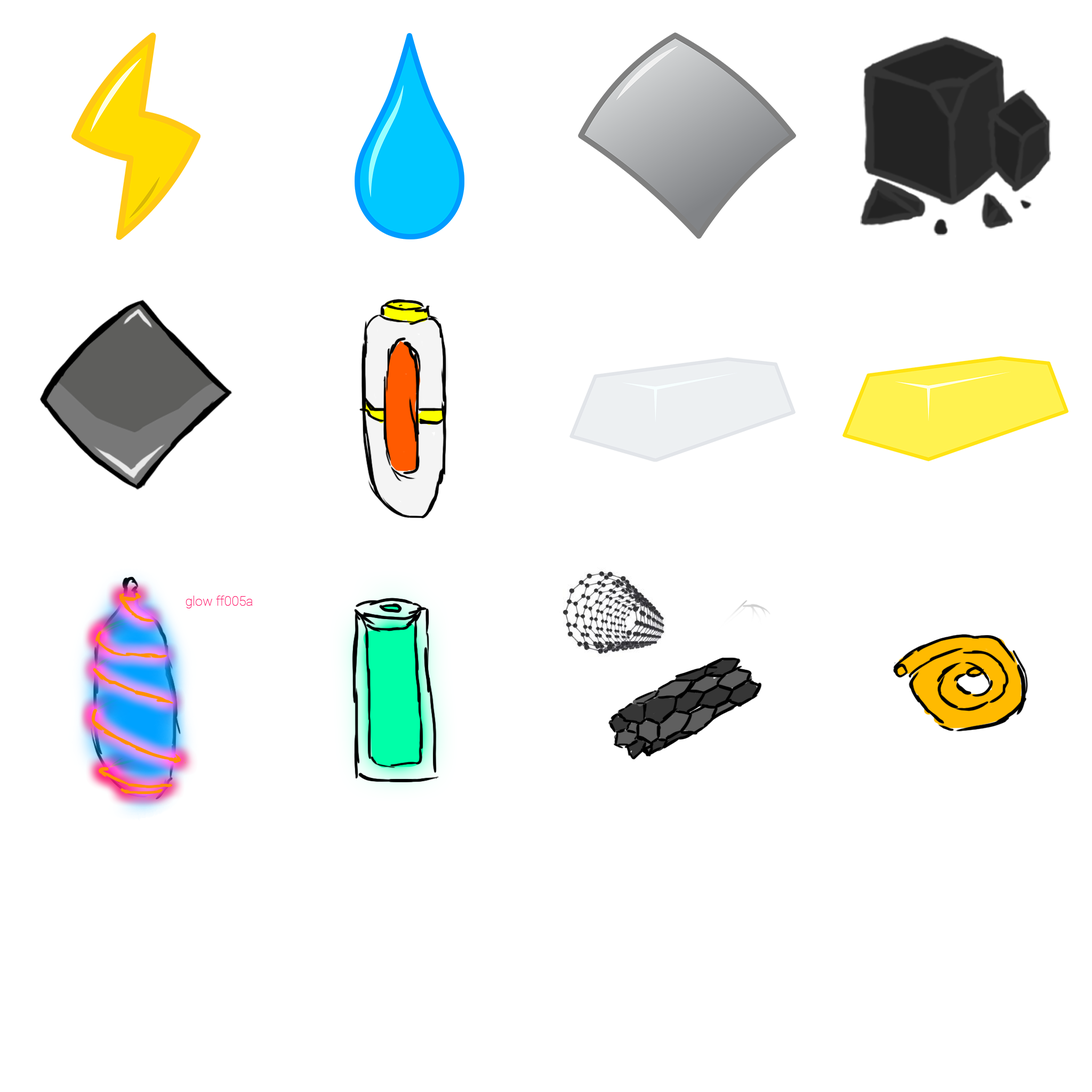
<style>
.page{position:relative;width:1092px;height:1092px;background:#ffffff}
.page>*{position:absolute;margin:0}
.t1{font:13.3px "Roboto-Thin";color:#ff005a}
</style>
<div class="page">
<p class="t1" style="left:186px;top:596px;width:66px;height:12px">glow ff005a</p>
</div>
